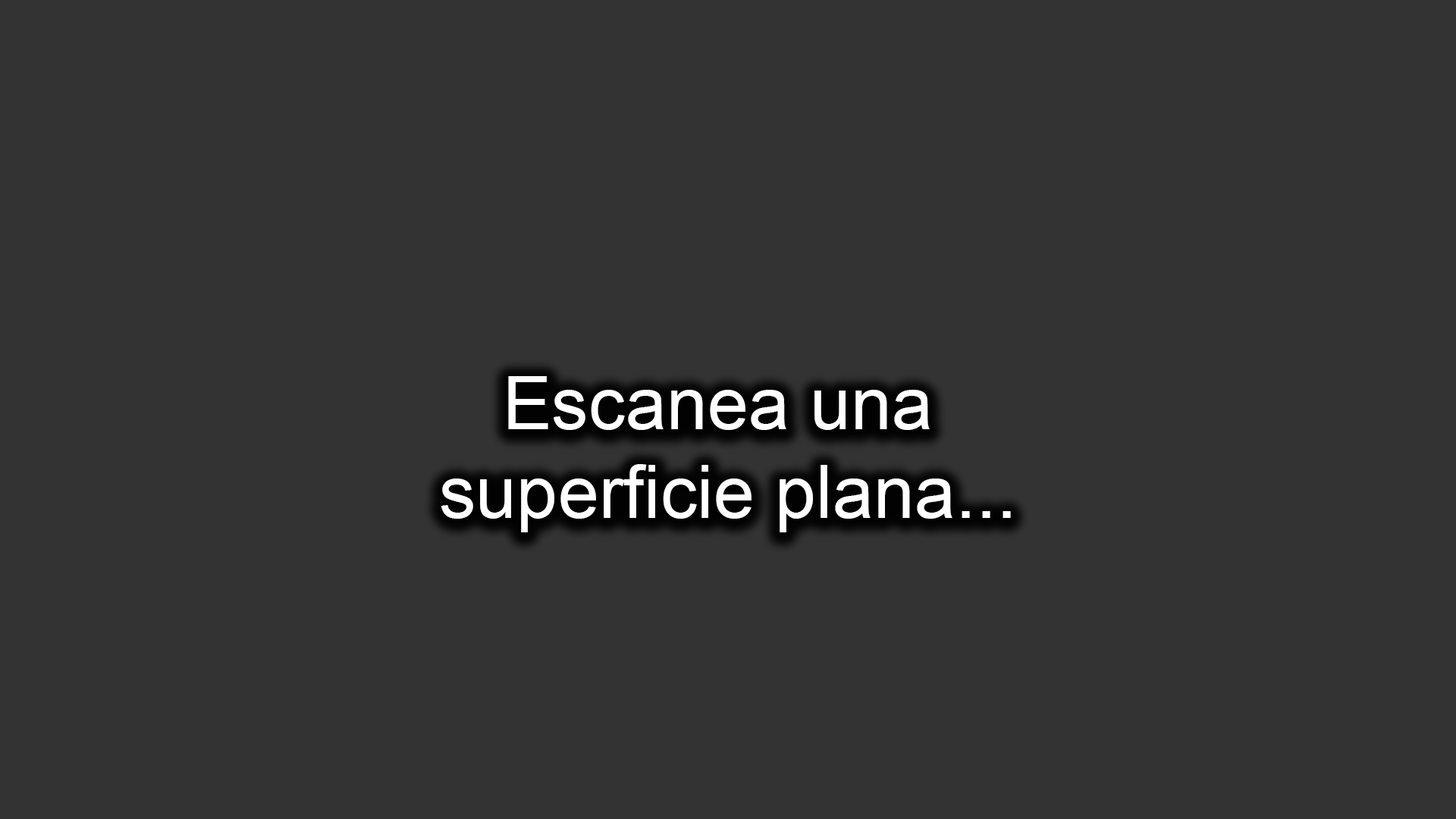
<style>
.page{position:relative;width:1456px;height:819px;background:#333333}
.page>*{position:absolute;margin:0}
.t1{font:73.8px "ArialMT";color:#ffffff}
</style>
<div class="page">
<p class="t1" style="left:441px;top:376px;width:570px;height:156px;text-align:center">Escanea una <br>superficie plana...</p>
</div>
